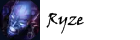
<style>
.page{position:relative;width:140px;height:40px;background:#ffffff}
.page>*{position:absolute;margin:0}
.t1{font:12px "VinerHandITC";color:#000000}
</style>
<div class="page">
<p class="t1" style="left:46px;top:12px;width:38px;height:22px">Ryze</p>
</div>
